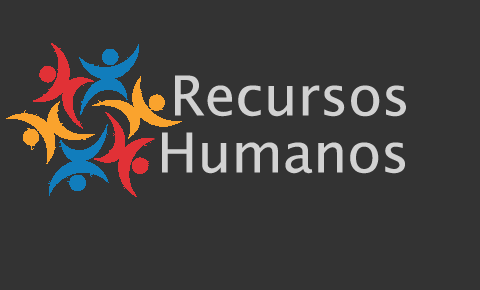
<style>
.page{position:relative;width:480px;height:290px;background:#333333}
.page>*{position:absolute;margin:0}
.t1{font:55px "LucidaSans";color:#d1d1d1}
.t2{font:55px "LucidaSans";color:#d2d2d2}
</style>
<div class="page">
<p class="t1" style="left:175px;top:75px;width:231px;height:42px">Recursos</p>
<p class="t2" style="left:162px;top:132px;width:243px;height:42px">Humanos</p>
</div>
